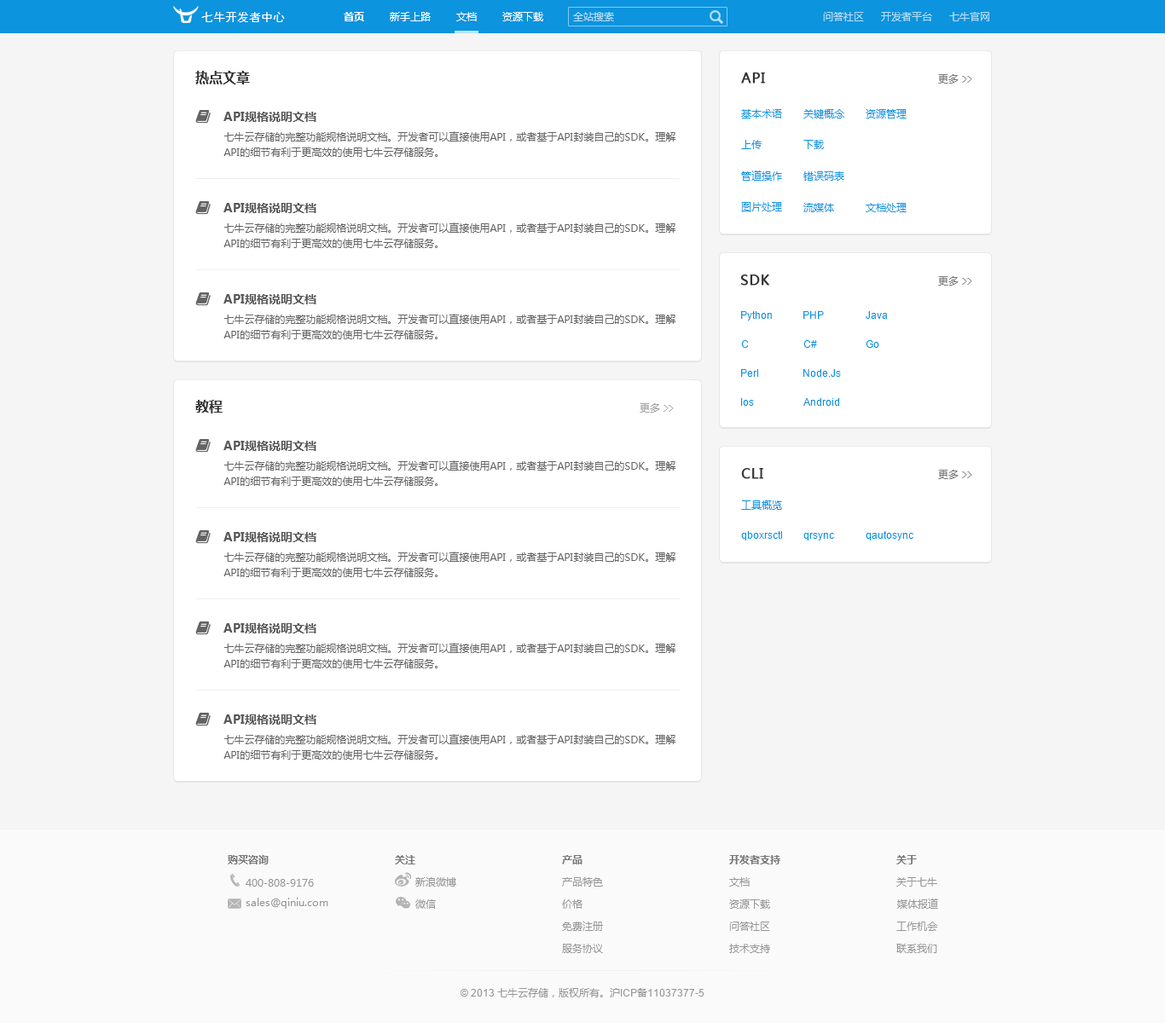
<style>
.page{position:relative;width:1165px;height:1023px;background:#ffffff}
.page>*{position:absolute;margin:0}
.t1{font:11.9px "SimHei";color:#ffffff}
.t2{font:10.2px "MicrosoftYaHei-Bold";color:#ffffff}
.t3{font:10.2px "MicrosoftYaHei";color:#ffffff}
.t4{font:10.2px "MicrosoftYaHei";color:#b7dff5}
.t5{font:13.6px "MicrosoftYaHei-Bold";color:#323232}
.t6{font:13.6px "MicrosoftYaHei";color:#323232;font-weight:bold}
.t7{font:10.2px "MicrosoftYaHei";color:#787878}
.t8{font:10.2px "SimHei";color:#787878}
.t9{font:11.9px "MicrosoftYaHei-Bold";color:#585858}
.t10{font:10.2px "MicrosoftYaHei";color:#0c94de}
.t11{font:10.2px/15.4px "MicrosoftYaHei";color:#646464}
.t12{font:10.2px "ArialMT";color:#0c94de}
.t13{font:10.2px "MicrosoftYaHei";color:#a0a0a0}
.t14{font:10.2px "SimHei";color:#a0a0a0}
.t15{font:10.2px "MicrosoftYaHei-Bold";color:#787878}
.t16{font:10.2px "MicrosoftYaHei";color:#969696}
.t17{font:10.2px "ArialMT";color:#969696}
</style>
<div class="page">
<p class="t1" style="left:201px;top:12px;width:84px;height:11px">七牛开发者中心</p>
<p class="t2" style="left:344px;top:12px;width:20px;height:9px">首页</p>
<p class="t3" style="left:390px;top:12px;width:41px;height:9px">新手上路</p>
<p class="t3" style="left:456px;top:12px;width:21px;height:9px">文档</p>
<p class="t3" style="left:502px;top:12px;width:41px;height:9px">资源下载</p>
<p class="t4" style="left:573px;top:12px;width:41px;height:9px">全站搜索</p>
<p class="t4" style="left:823px;top:12px;width:41px;height:9px">问答社区</p>
<p class="t4" style="left:881px;top:12px;width:51px;height:9px">开发者平台</p>
<p class="t4" style="left:949px;top:12px;width:40px;height:9px">七牛官网</p>
<p class="t5" style="left:195px;top:71px;width:55px;height:13px">热点文章</p>
<p class="t6" style="left:741px;top:72px;width:24px;height:12px">API</p>
<p class="t7" style="left:938px;top:74px;width:34px;height:10px">更多 <span class="t8">&gt;&gt;</span></p>
<p class="t9" style="left:223px;top:112px;width:93px;height:10px">API规格说明文档</p>
<p class="t10" style="left:741px;top:109px;width:41px;height:10px">基本术语</p>
<p class="t10" style="left:803px;top:109px;width:41px;height:10px">关键概念</p>
<p class="t10" style="left:866px;top:109px;width:41px;height:10px">资源管理</p>
<p class="t11" style="left:223px;top:131px;width:453px;height:26px">七牛云存储的完整功能规格说明文档。开发者可以直接使用API，或者基于API封装自己的SDK。理解<br>API的细节有利于更高效的使用七牛云存储服务。</p>
<p class="t10" style="left:741px;top:140px;width:21px;height:9px">上传</p>
<p class="t10" style="left:803px;top:140px;width:21px;height:9px">下载</p>
<p class="t10" style="left:741px;top:171px;width:41px;height:10px">管道操作</p>
<p class="t10" style="left:803px;top:171px;width:41px;height:10px">错误码表</p>
<p class="t9" style="left:223px;top:203px;width:93px;height:10px">API规格说明文档</p>
<p class="t10" style="left:741px;top:202px;width:41px;height:10px">图片处理</p>
<p class="t10" style="left:803px;top:203px;width:31px;height:9px">流媒体</p>
<p class="t10" style="left:866px;top:203px;width:41px;height:9px">文档处理</p>
<p class="t11" style="left:223px;top:223px;width:453px;height:25px">七牛云存储的完整功能规格说明文档。开发者可以直接使用API，或者基于API封装自己的SDK。理解<br>API的细节有利于更高效的使用七牛云存储服务。</p>
<p class="t6" style="left:740px;top:275px;width:30px;height:11px">SDK</p>
<p class="t7" style="left:938px;top:276px;width:34px;height:10px">更多 <span class="t8">&gt;&gt;</span></p>
<p class="t9" style="left:223px;top:294px;width:93px;height:10px">API规格说明文档</p>
<p class="t11" style="left:223px;top:314px;width:453px;height:25px">七牛云存储的完整功能规格说明文档。开发者可以直接使用API，或者基于API封装自己的SDK。理解<br>API的细节有利于更高效的使用七牛云存储服务。</p>
<p class="t12" style="left:741px;top:311px;width:31px;height:10px">Python</p>
<p class="t12" style="left:803px;top:311px;width:21px;height:8px">PHP</p>
<p class="t12" style="left:866px;top:311px;width:21px;height:8px">Java</p>
<p class="t12" style="left:741px;top:340px;width:7px;height:8px">C</p>
<p class="t12" style="left:803px;top:340px;width:14px;height:8px">C#</p>
<p class="t12" style="left:866px;top:340px;width:13px;height:8px">Go</p>
<p class="t12" style="left:741px;top:369px;width:17px;height:8px">Perl</p>
<p class="t12" style="left:803px;top:369px;width:38px;height:8px">Node.Js</p>
<p class="t5" style="left:195px;top:400px;width:28px;height:14px">教程</p>
<p class="t12" style="left:741px;top:398px;width:13px;height:8px">Ios</p>
<p class="t12" style="left:803px;top:398px;width:36px;height:8px">Android</p>
<p class="t13" style="left:640px;top:403px;width:34px;height:10px">更多 <span class="t14">&gt;&gt;</span></p>
<p class="t9" style="left:223px;top:441px;width:93px;height:10px">API规格说明文档</p>
<p class="t11" style="left:223px;top:461px;width:453px;height:25px">七牛云存储的完整功能规格说明文档。开发者可以直接使用API，或者基于API封装自己的SDK。理解<br>API的细节有利于更高效的使用七牛云存储服务。</p>
<p class="t6" style="left:741px;top:468px;width:22px;height:11px">CLI</p>
<p class="t7" style="left:938px;top:470px;width:34px;height:9px">更多 <span class="t8">&gt;&gt;</span></p>
<p class="t10" style="left:741px;top:501px;width:41px;height:9px">工具概览</p>
<p class="t9" style="left:223px;top:532px;width:93px;height:10px">API规格说明文档</p>
<p class="t12" style="left:741px;top:531px;width:41px;height:10px">qboxrsctl</p>
<p class="t12" style="left:803px;top:533px;width:31px;height:8px">qrsync</p>
<p class="t12" style="left:866px;top:531px;width:47px;height:10px">qautosync</p>
<p class="t11" style="left:223px;top:552px;width:453px;height:25px">七牛云存储的完整功能规格说明文档。开发者可以直接使用API，或者基于API封装自己的SDK。理解<br>API的细节有利于更高效的使用七牛云存储服务。</p>
<p class="t9" style="left:223px;top:623px;width:93px;height:11px">API规格说明文档</p>
<p class="t11" style="left:223px;top:643px;width:453px;height:26px">七牛云存储的完整功能规格说明文档。开发者可以直接使用API，或者基于API封装自己的SDK。理解<br>API的细节有利于更高效的使用七牛云存储服务。</p>
<p class="t9" style="left:223px;top:715px;width:93px;height:10px">API规格说明文档</p>
<p class="t11" style="left:223px;top:734px;width:453px;height:26px">七牛云存储的完整功能规格说明文档。开发者可以直接使用API，或者基于API封装自己的SDK。理解<br>API的细节有利于更高效的使用七牛云存储服务。</p>
<p class="t15" style="left:228px;top:855px;width:41px;height:10px">购买咨询</p>
<p class="t15" style="left:395px;top:855px;width:20px;height:10px">关注</p>
<p class="t15" style="left:562px;top:855px;width:21px;height:10px">产品</p>
<p class="t15" style="left:729px;top:855px;width:51px;height:10px">开发者支持</p>
<p class="t15" style="left:896px;top:855px;width:21px;height:10px">关于</p>
<p class="t16" style="left:246px;top:879px;width:68px;height:8px">400-808-9176</p>
<p class="t16" style="left:415px;top:878px;width:41px;height:9px">新浪微博</p>
<p class="t16" style="left:562px;top:878px;width:41px;height:9px">产品特色</p>
<p class="t16" style="left:729px;top:878px;width:21px;height:9px">文档</p>
<p class="t16" style="left:896px;top:878px;width:41px;height:9px">关于七牛</p>
<p class="t16" style="left:246px;top:898px;width:82px;height:11px">sales@qiniu.com</p>
<p class="t16" style="left:415px;top:900px;width:21px;height:9px">微信</p>
<p class="t16" style="left:562px;top:900px;width:21px;height:9px">价格</p>
<p class="t16" style="left:729px;top:900px;width:41px;height:9px">资源下载</p>
<p class="t16" style="left:896px;top:899px;width:42px;height:10px">媒体报道</p>
<p class="t16" style="left:562px;top:922px;width:41px;height:9px">免费注册</p>
<p class="t16" style="left:729px;top:922px;width:41px;height:9px">问答社区</p>
<p class="t16" style="left:896px;top:922px;width:42px;height:9px">工作机会</p>
<p class="t16" style="left:562px;top:944px;width:41px;height:10px">服务协议</p>
<p class="t16" style="left:729px;top:944px;width:41px;height:10px">技术支持</p>
<p class="t16" style="left:896px;top:944px;width:41px;height:10px">联系我们</p>
<p class="t16" style="left:461px;top:989px;width:244px;height:9px"><span class="t17">© 2013 </span>七牛云存储，版权所有。沪<span class="t17">ICP</span>备<span class="t17">11037377-5</span></p>
</div>
